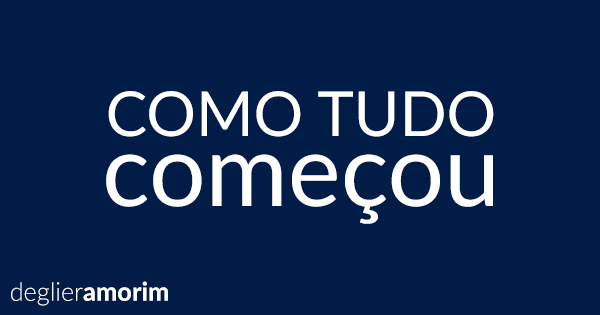
<style>
.page{position:relative;width:600px;height:315px;background:#001c47}
.page>*{position:absolute;margin:0}
.t1{font:62px "Lato-Regular";color:#ffffff}
.t2{font:100px/70px "Lato-Regular";color:#ffffff}
.t3{font:25.7px "Lato-Light";color:#ffffff}
.t4{font:25.7px "Lato-Heavy";color:#ffffff}
</style>
<div class="page">
<p class="t1" style="left:106px;top:91px;width:388px;height:133px;text-align:center">COMO TUDO<br><span class="t2">começou</span></p>
<p class="t3" style="left:11px;top:281px;width:157px;height:25px">deglier<span class="t4">amorim</span></p>
</div>
